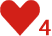
<style>
.page{position:relative;width:52px;height:36px;background:#d22018}
.page>*{position:absolute;margin:0}
.t1{font:23.4px "MyriadPro-Regular";letter-spacing:-0.1em;color:#d22018;font-weight:bold}
</style>
<div class="page">
<p class="t1" style="left:39px;top:19px;width:12px;height:17px">4</p>
</div>
